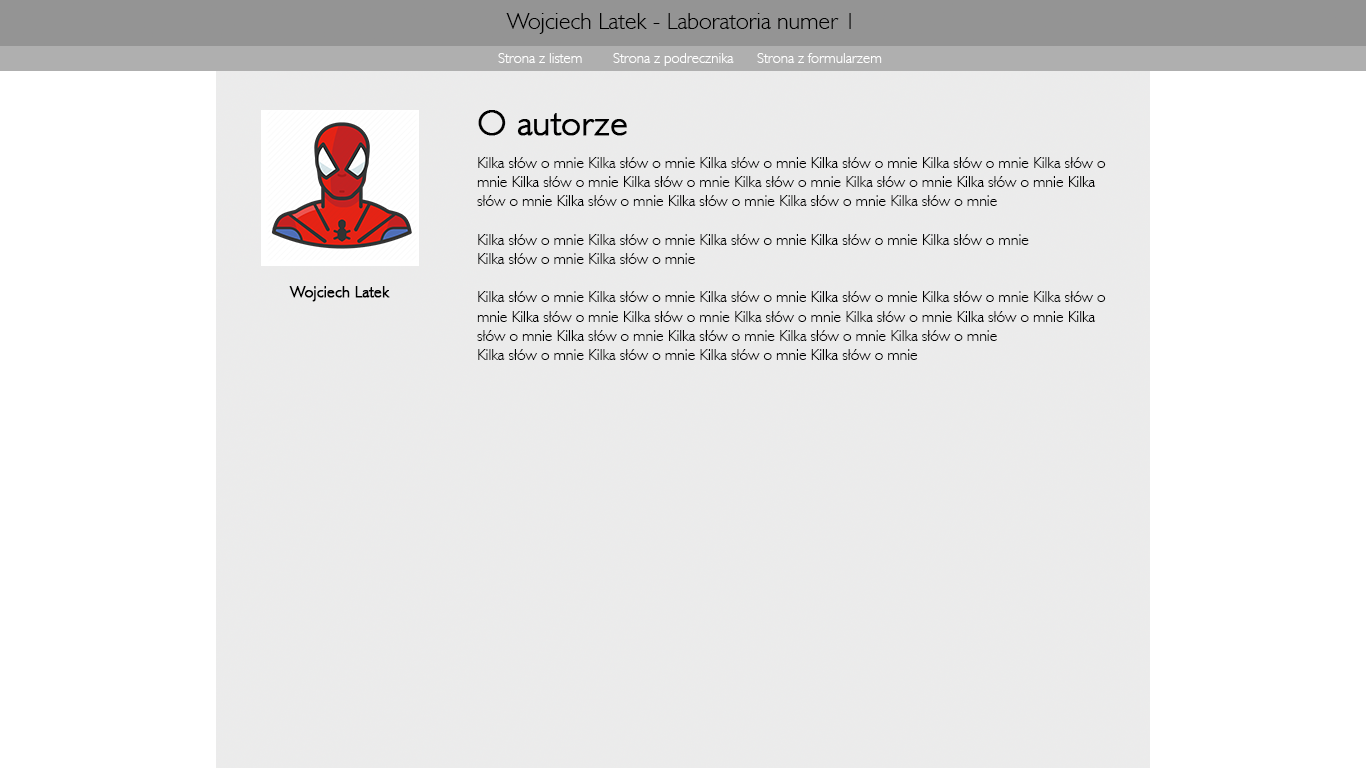
<style>
.page{position:relative;width:1366px;height:768px;background:#ffffff}
.page>*{position:absolute;margin:0}
.t1{font:24px "Humanist521BT-Light";color:#000000}
.t2{font:15px "Humanist521BT-Light";color:#ffffff}
.t3{font:36px "Humanist521BT-Light";color:#000000;font-weight:bold}
.t4{font:16px "Humanist521BT-Light";color:#000000}
.t5{font:16px "Humanist521BT-Light";color:#000000;font-weight:bold}
</style>
<div class="page">
<p class="t1" style="left:506px;top:13px;width:345px;height:21px">Wojciech Latek - Laboratoria numer 1</p>
<p class="t2" style="left:498px;top:53px;width:84px;height:10px">Strona z listem</p>
<p class="t2" style="left:613px;top:53px;width:121px;height:13px">Strona z podrecznika</p>
<p class="t2" style="left:757px;top:53px;width:125px;height:10px">Strona z formularzem</p>
<p class="t3" style="left:478px;top:110px;width:149px;height:26px">O autorze</p>
<p class="t4" style="left:477px;top:157px;width:629px;height:203px">Kilka słów o mnie Kilka słów o mnie Kilka słów o mnie Kilka słów o mnie Kilka słów o mnie Kilka słów o mnie Kilka słów o mnie Kilka słów o mnie Kilka słów o mnie Kilka słów o mnie Kilka słów o mnie Kilka słów o mnie Kilka słów o mnie Kilka słów o mnie Kilka słów o mnie Kilka słów o mnie <br><br>Kilka słów o mnie Kilka słów o mnie Kilka słów o mnie Kilka słów o mnie Kilka słów o mnie <br>Kilka słów o mnie Kilka słów o mnie <br><br>Kilka słów o mnie Kilka słów o mnie Kilka słów o mnie Kilka słów o mnie Kilka słów o mnie Kilka słów o mnie Kilka słów o mnie Kilka słów o mnie Kilka słów o mnie Kilka słów o mnie Kilka słów o mnie Kilka słów o mnie Kilka słów o mnie Kilka słów o mnie Kilka słów o mnie Kilka słów o mnie <br>Kilka słów o mnie Kilka słów o mnie Kilka słów o mnie Kilka słów o mnie</p>
<p class="t5" style="left:289px;top:286px;width:101px;height:16px">Wojciech Latek</p>
</div>
